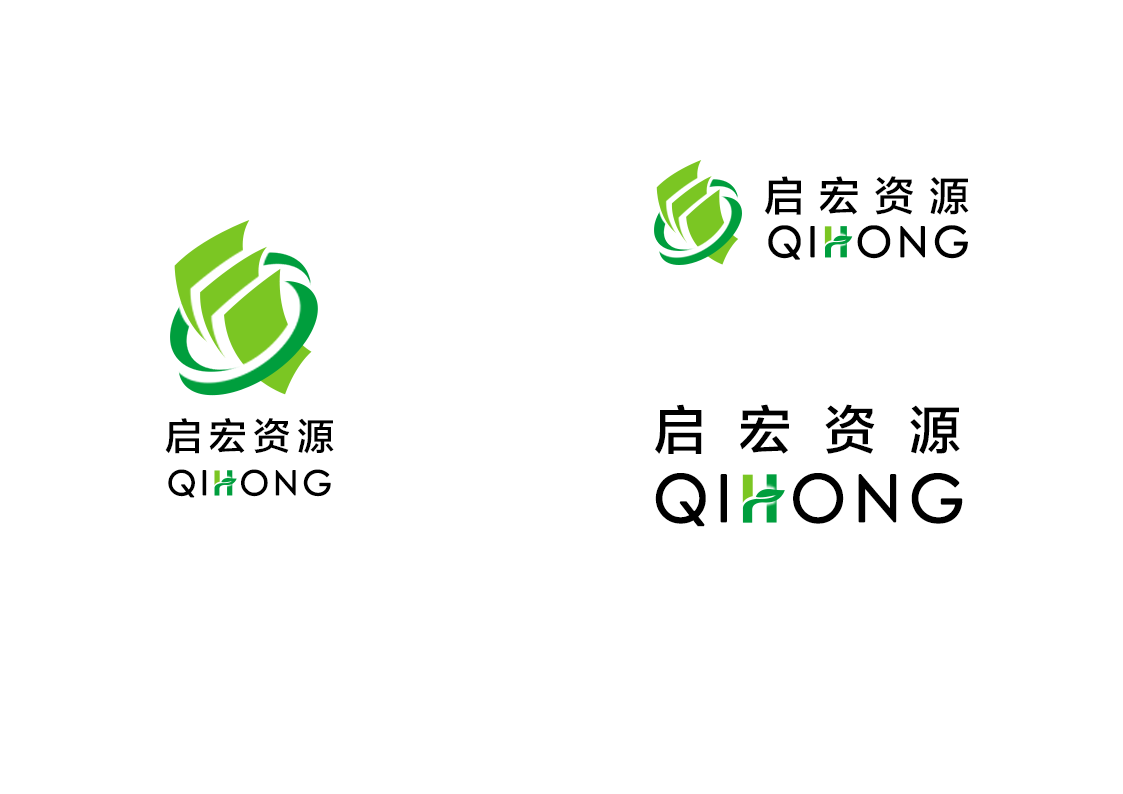
<style>
.page{position:relative;width:1123px;height:794px;background:#ffffff}
.page>*{position:absolute;margin:0}
.t1{font:40.7px "FZLTZHK--GBK1-0";letter-spacing:0.37em;color:#000000}
.t2{font:42px "CenturyGothic";letter-spacing:0.1em;color:#000000;font-weight:bold}
.t3{font:52.5px "FZLTZHK--GBK1-0";letter-spacing:0.65em;color:#000000}
.t4{font:37.5px "FZLTZHK--GBK1-0";letter-spacing:0.18em;color:#000000}
.t5{font:33.8px "CenturyGothic";letter-spacing:0.1em;color:#000000;font-weight:bold}
.t6{font:64.7px "CenturyGothic";letter-spacing:0.1em;color:#000000;font-weight:bold}
</style>
<div class="page">
<p class="t1" style="left:764px;top:176px;width:205px;height:39px">启宏资源</p>
<p class="t2" style="left:768px;top:225px;width:200px;height:35px">QI  ONG</p>
<p class="t3" style="left:655px;top:404px;width:305px;height:50px">启宏资源</p>
<p class="t4" style="left:165px;top:418px;width:169px;height:36px">启宏资源</p>
<p class="t5" style="left:168px;top:469px;width:163px;height:29px">QI  ONG</p>
<p class="t6" style="left:655px;top:473px;width:308px;height:54px">QI  ONG</p>
</div>
